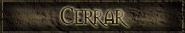
<style>
.page{position:relative;width:185px;height:33px}
.page>*{position:absolute;margin:0}
.t1{font:22px "Morpheus"}
</style>
<div class="page">
<p class="t1" style="left:60px;top:7px;width:70px;height:20px">Cerrar</p>
</div>
